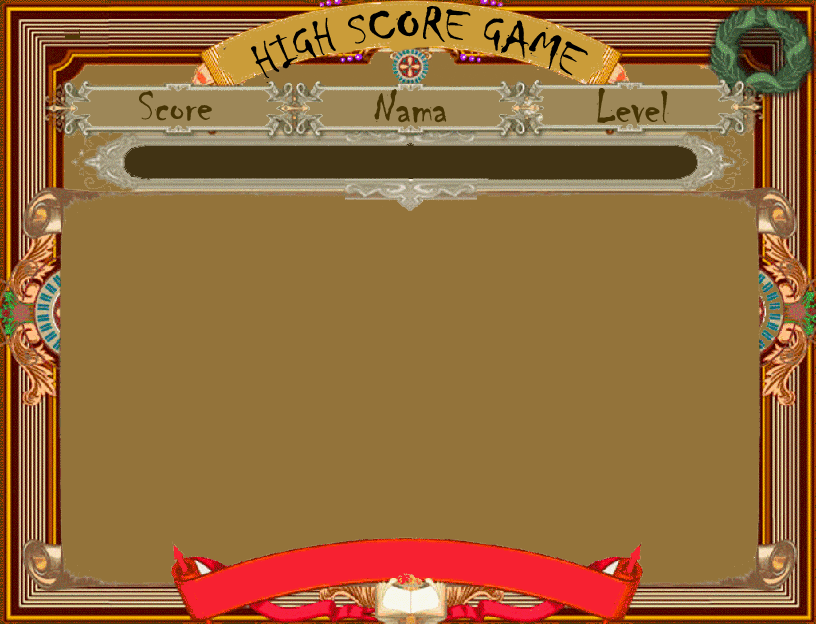
<style>
.page{position:relative;width:816px;height:624px;background:#93733a}
.page>*{position:absolute;margin:0}
.t1{font:48px "Chiller-Regular";color:#000000}
.t2{font:48px "Chiller-Regular";color:#463404}
</style>
<div class="page">
<p class="t1" style="left:251px;top:6px;width:337px;height:77px">HIGH SCORE GAME</p>
<p class="t2" style="left:374px;top:89px;width:73px;height:34px">Nama</p>
<p class="t2" style="left:596px;top:88px;width:73px;height:35px">Level</p>
<p class="t2" style="left:139px;top:90px;width:73px;height:31px">Score</p>
</div>
